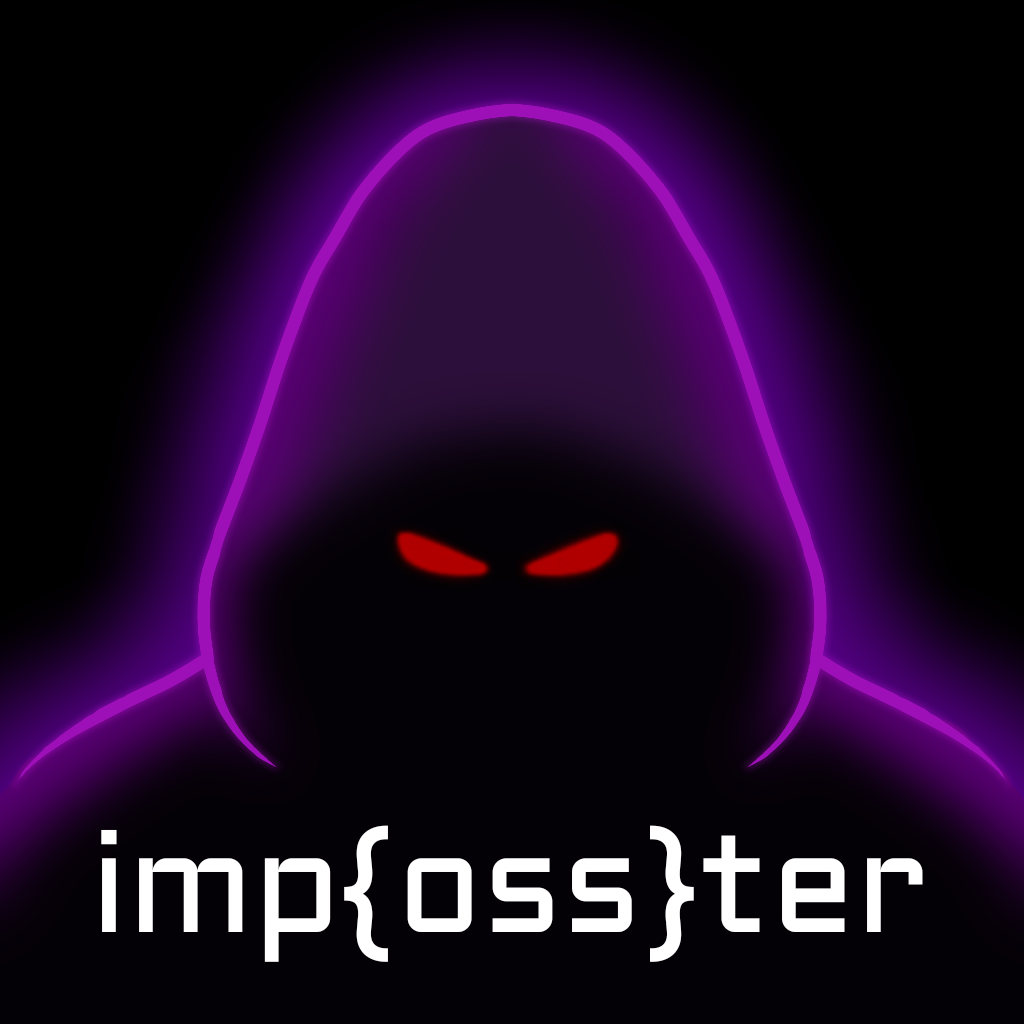
<style>
.page{position:relative;width:1024px;height:1024px;background:#040106}
.page>*{position:absolute;margin:0}
.t1{font:141.7px "Aldrich-Regular";color:#ffffff}
</style>
<div class="page">
<p class="t1" style="left:100px;top:825px;width:824px;height:138px">imp{oss}ter</p>
</div>
